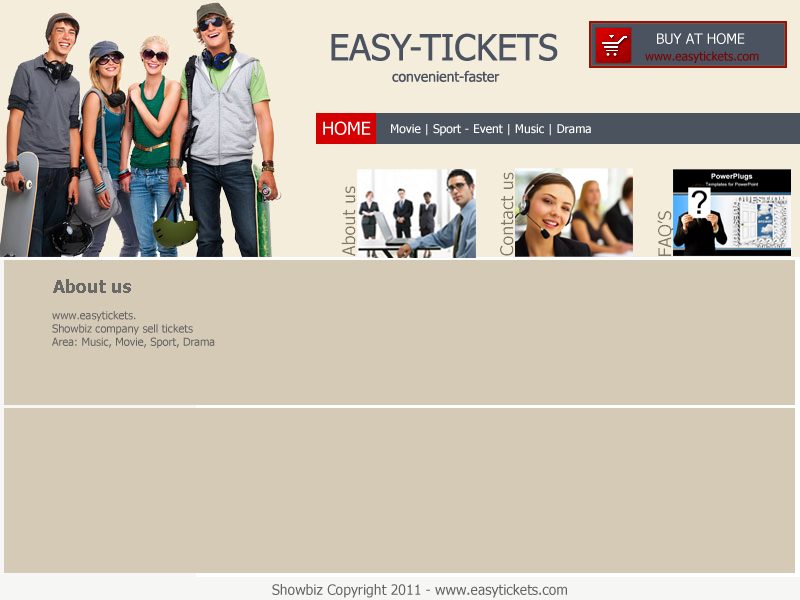
<style>
.page{position:relative;width:800px;height:600px;background:#d5cab6}
.page>*{position:absolute;margin:0}
.t1{font:36px "Tahoma";color:#4b5360}
.t2{font:14px "Tahoma";color:#ffffff}
.t3{font:12px "Tahoma";color:#770404}
.t4{font:14px "Tahoma";color:#4b5360}
.t5{font:18px "Tahoma";color:#ffffff}
.t6{font:12px "Tahoma";color:#ffffff}
.t7{font:18px "Tahoma-Bold";color:#6a6968}
.t8{font:11px "Tahoma";color:#636363}
.t9{font:14px "Tahoma";color:#636363}
</style>
<div class="page">
<p class="t1" style="left:331px;top:33px;width:227px;height:28px">EASY-TICKETS</p>
<p class="t2" style="left:657px;top:33px;width:88px;height:11px">BUY AT HOME</p>
<p class="t3" style="left:645px;top:51px;width:114px;height:12px">www.easytickets.com</p>
<p class="t4" style="left:392px;top:70px;width:108px;height:12px">convenient-faster</p>
<p class="t5" style="left:323px;top:121px;width:48px;height:14px">HOME</p>
<p class="t6" style="left:391px;top:124px;width:200px;height:12px">Movie | Sport - Event | Music | Drama</p>
<p class="t7" style="left:53px;top:279px;width:78px;height:14px">About us</p>
<p class="t8" style="left:52px;top:311px;width:163px;height:37px">www.easytickets.<br>Showbiz company sell tickets<br>Area: Music, Movie, Sport, Drama</p>
<p class="t9" style="left:272px;top:584px;width:295px;height:14px">Showbiz Copyright 2011 - www.easytickets.com</p>
</div>
